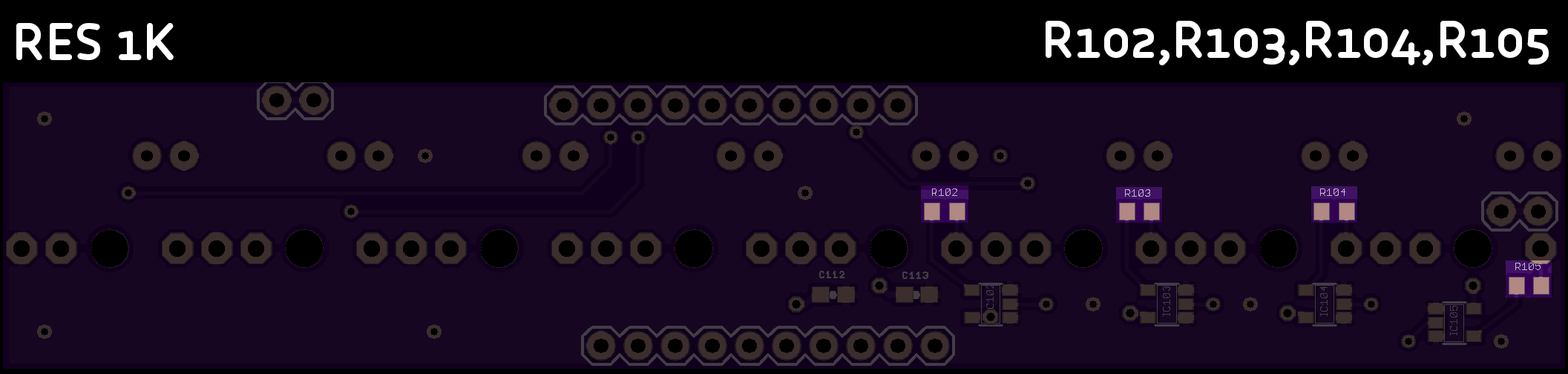
<style>
.page{position:relative;width:1568px;height:374px;background:#160622}
.page>*{position:absolute;margin:0}
.t1{font:53.4px "CoreHumanistSans-Bold";color:#ffffff}
</style>
<div class="page">
<p class="t1" style="left:16px;top:23px;width:158px;height:37px">RES 1K</p>
<p class="t1" style="left:1046px;top:21px;width:503px;height:44px">R102,R103,R104,R105</p>
</div>
